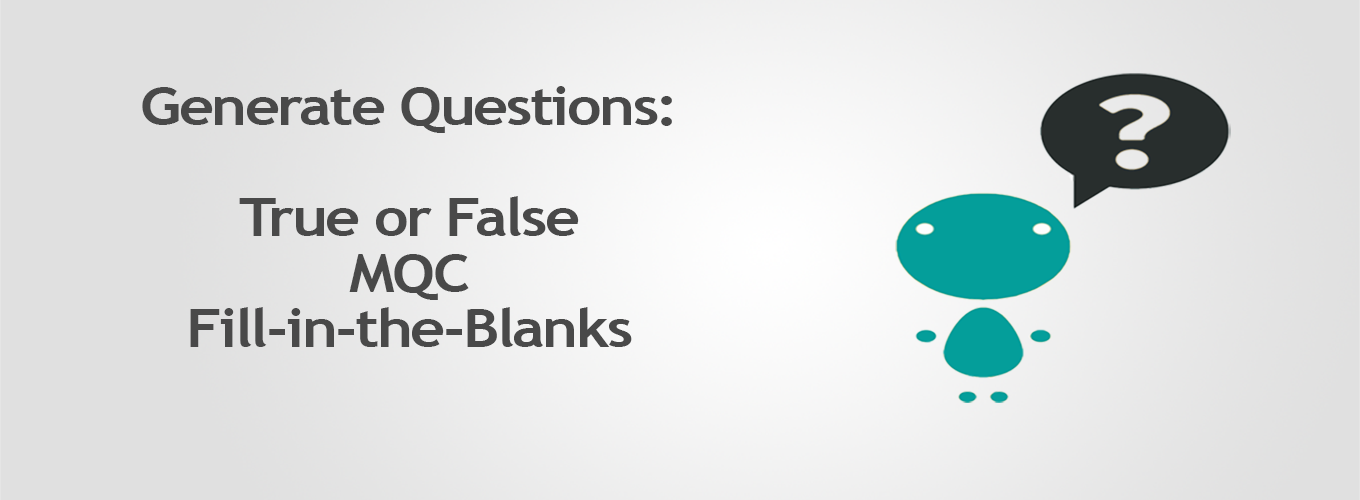
<style>
.page{position:relative;width:1360px;height:500px}
.page>*{position:absolute;margin:0}
.t1{font:53.4px/55.6px "TrebuchetMS-Bold";letter-spacing:-0.04em;color:#494949;scale:1.14 1}
</style>
<div class="page">
<p class="t1" style="left:142px;top:86px;width:530px;height:261px;text-align:center">Generate Questions:<br><br>True or False<br>MQC<br>Fill-in-the-Blanks</p>
</div>
